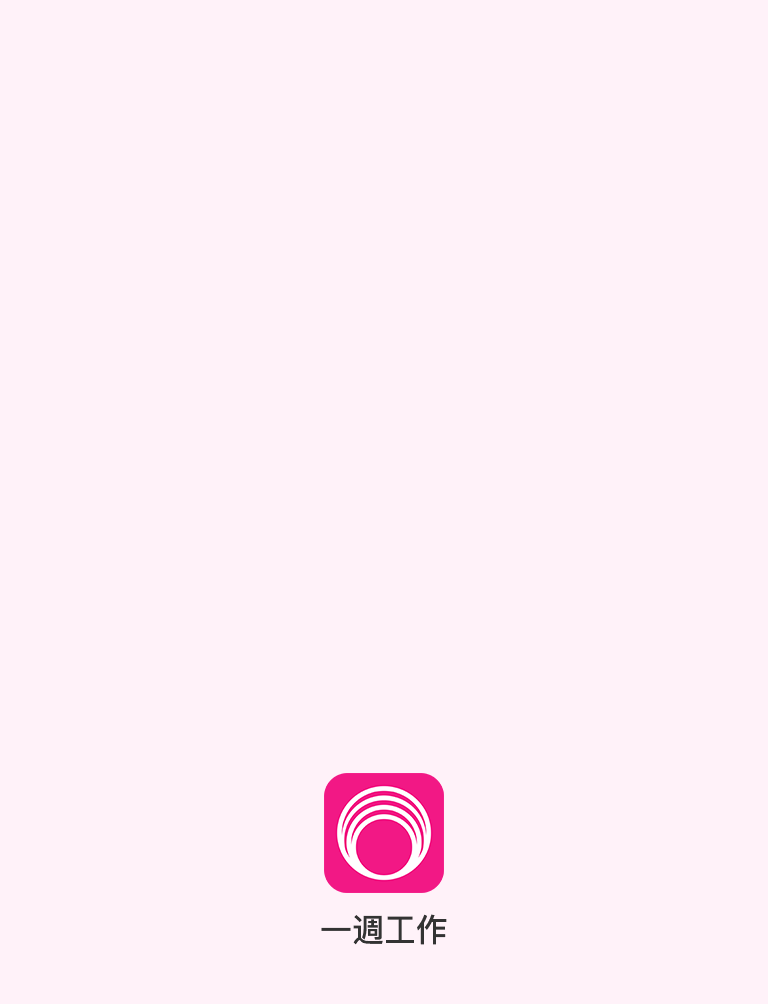
<style>
.page{position:relative;width:768px;height:1004px;background:#fff2f9}
.page>*{position:absolute;margin:0}
.t1{font:32px "PingFang-SC-Bold";color:#333333}
</style>
<div class="page">
<p class="t1" style="left:321px;top:914px;width:126px;height:31px">一週工作</p>
</div>
